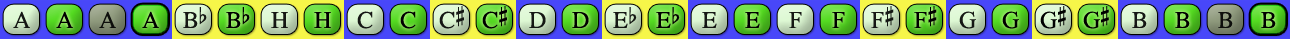
<style>
.page{position:relative;width:1290px;height:39px}
.page>*{position:absolute;margin:0}
.t1{font:24px "OpusChords";color:#000000}
.t2{font:24px "OpusChords";letter-spacing:-0.025em;color:#000000}
</style>
<div class="page">
<p class="t1" style="left:439px;top:6px;width:25px;height:23px;opacity:0.9">C#</p>
<p class="t1" style="left:482px;top:6px;width:25px;height:23px">C#</p>
<p class="t1" style="left:871px;top:6px;width:23px;height:22px;opacity:0.9">F#</p>
<p class="t1" style="left:914px;top:6px;width:23px;height:22px">F#</p>
<p class="t2" style="left:1040px;top:6px;width:26px;height:23px">G#</p>
<p class="t2" style="left:1083px;top:6px;width:26px;height:23px">G#</p>
<p class="t1" style="left:13px;top:11px;width:17px;height:17px;opacity:0.9">A</p>
<p class="t1" style="left:56px;top:11px;width:17px;height:17px">A</p>
<p class="t1" style="left:99px;top:11px;width:17px;height:17px;opacity:0.9">A</p>
<p class="t1" style="left:142px;top:11px;width:17px;height:17px">A</p>
<p class="t1" style="left:183px;top:7px;width:24px;height:21px;opacity:0.9">Bb</p>
<p class="t1" style="left:226px;top:7px;width:24px;height:21px">Bb</p>
<p class="t1" style="left:271px;top:12px;width:17px;height:16px;opacity:0.9">H</p>
<p class="t1" style="left:314px;top:12px;width:17px;height:16px">H</p>
<p class="t1" style="left:357px;top:11px;width:16px;height:18px;opacity:0.9">C</p>
<p class="t1" style="left:400px;top:11px;width:16px;height:18px">C</p>
<p class="t1" style="left:529px;top:12px;width:17px;height:16px;opacity:0.9">D</p>
<p class="t1" style="left:572px;top:12px;width:17px;height:16px">D</p>
<p class="t1" style="left:613px;top:7px;width:24px;height:21px;opacity:0.9">Eb</p>
<p class="t1" style="left:656px;top:7px;width:24px;height:21px">Eb</p>
<p class="t1" style="left:702px;top:12px;width:15px;height:16px;opacity:0.9">E</p>
<p class="t1" style="left:745px;top:12px;width:15px;height:16px">E</p>
<p class="t1" style="left:789px;top:12px;width:13px;height:16px;opacity:0.9">F</p>
<p class="t1" style="left:832px;top:12px;width:13px;height:16px">F</p>
<p class="t1" style="left:959px;top:11px;width:17px;height:18px;opacity:0.9">G</p>
<p class="t1" style="left:1002px;top:11px;width:17px;height:18px">G</p>
<p class="t1" style="left:1132px;top:12px;width:15px;height:16px;opacity:0.9">B</p>
<p class="t1" style="left:1175px;top:12px;width:15px;height:16px">B</p>
<p class="t1" style="left:1218px;top:12px;width:15px;height:16px;opacity:0.9">B</p>
<p class="t1" style="left:1261px;top:12px;width:15px;height:16px">B</p>
</div>
